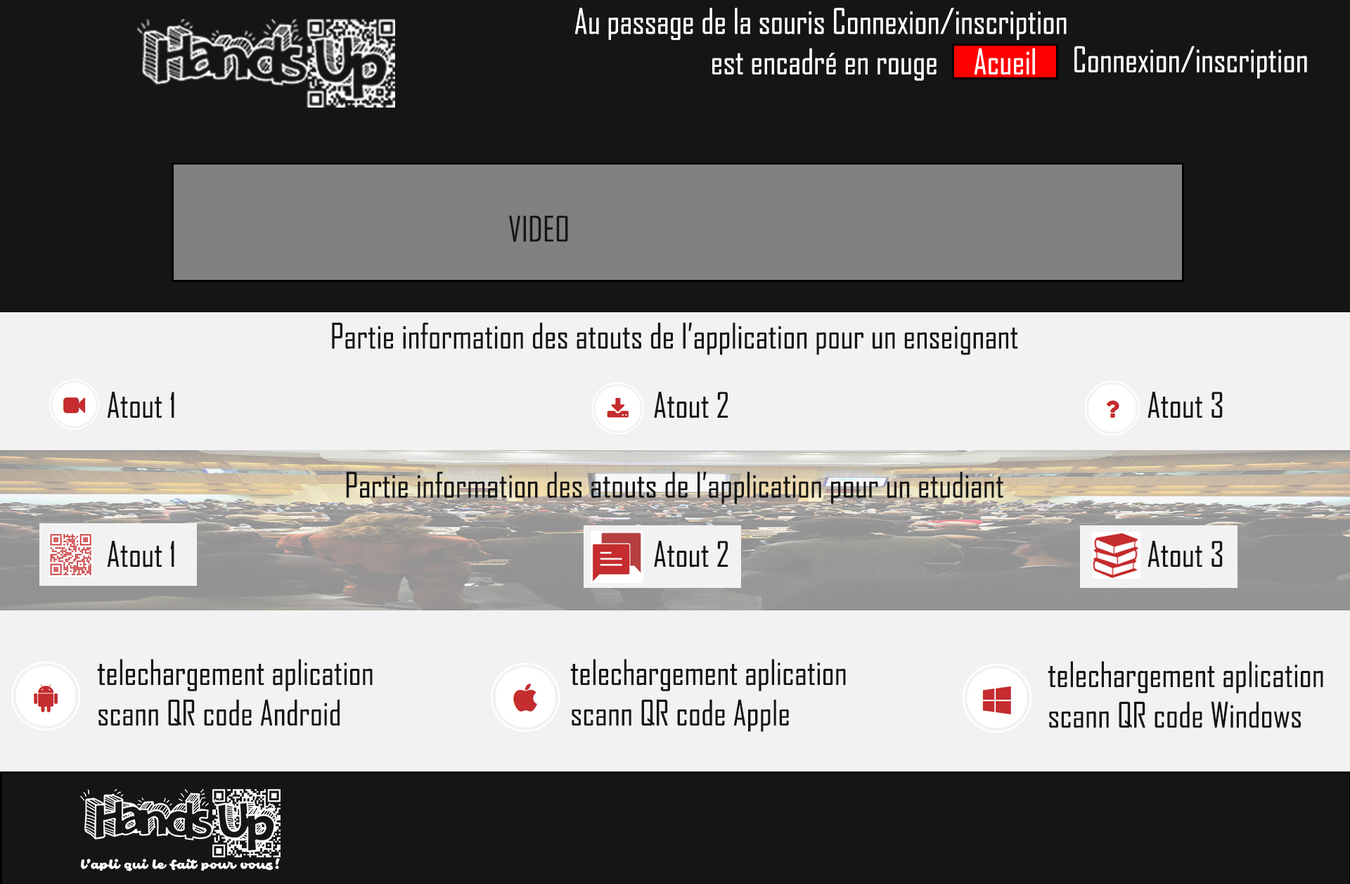
<style>
.page{position:relative;width:1350px;height:884px;background:#151515}
.page>*{position:absolute;margin:0}
.t1{font:33.7px "AgencyFB-Reg";color:#ffffff}
.t2{font:33.7px "AgencyFB-Reg";color:#151515}
</style>
<div class="page">
<p class="t1" style="left:574px;top:8px;width:492px;height:73px;text-align:center">Au passage de la souris Connexion/inscription <br>est encadré en rouge</p>
<p class="t1" style="left:974px;top:48px;width:61px;height:27px">Acueil</p>
<p class="t1" style="left:1074px;top:46px;width:233px;height:33px">Connexion/inscription</p>
<p class="t2" style="left:509px;top:215px;width:59px;height:27px">VIDEO</p>
<p class="t2" style="left:332px;top:322px;width:686px;height:33px">Partie information des atouts de l’application pour un enseignant</p>
<p class="t2" style="left:107px;top:392px;width:67px;height:26px">Atout 1</p>
<p class="t2" style="left:654px;top:392px;width:74px;height:26px">Atout 2</p>
<p class="t2" style="left:1147px;top:392px;width:75px;height:26px">Atout 3</p>
<p class="t2" style="left:346px;top:471px;width:657px;height:33px">Partie information des atouts de l’application pour un etudiant</p>
<p class="t2" style="left:107px;top:541px;width:67px;height:26px">Atout 1</p>
<p class="t2" style="left:654px;top:541px;width:74px;height:26px">Atout 2</p>
<p class="t2" style="left:1147px;top:541px;width:75px;height:26px">Atout 3</p>
<p class="t2" style="left:97px;top:659px;width:276px;height:66px">telechargement aplication <br>scann QR code Android</p>
<p class="t2" style="left:570px;top:659px;width:276px;height:73px">telechargement aplication <br>scann QR code Apple</p>
<p class="t2" style="left:1047px;top:661px;width:276px;height:67px">telechargement aplication <br>scann QR code Windows</p>
</div>
